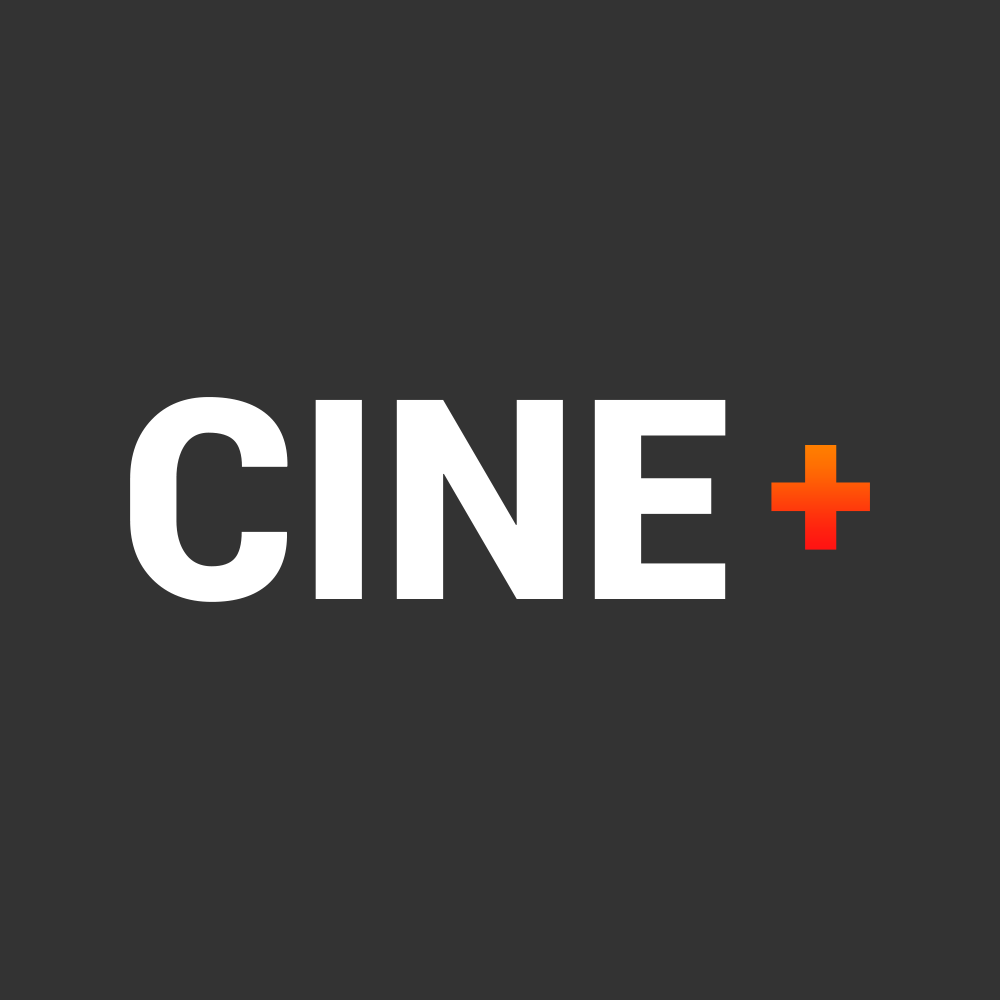
<style>
.page{position:relative;width:1000px;height:1000px;background:#333333}
.page>*{position:absolute;margin:0}
.t1{font:280.3px "Roboto-Black";color:#ffffff}
.t2{font:201.8px "Roboto-Black"}
</style>
<div class="page">
<p class="t1" style="left:130px;top:397px;width:596px;height:205px">CINE</p>
<p class="t2" style="left:771px;top:445px;width:99px;height:105px">+</p>
</div>
